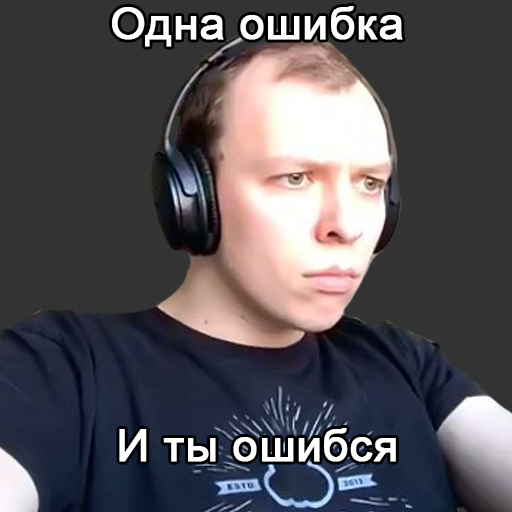
<style>
.page{position:relative;width:512px;height:512px;background:#333333}
.page>*{position:absolute;margin:0}
.t1{font:45px "ArialMT";color:#ffffff;font-weight:bold}
</style>
<div class="page">
<p class="t1" style="left:112px;top:6px;width:291px;height:41px">Одна ошибка</p>
<p class="t1" style="left:119px;top:428px;width:277px;height:34px">И ты ошибся</p>
</div>
